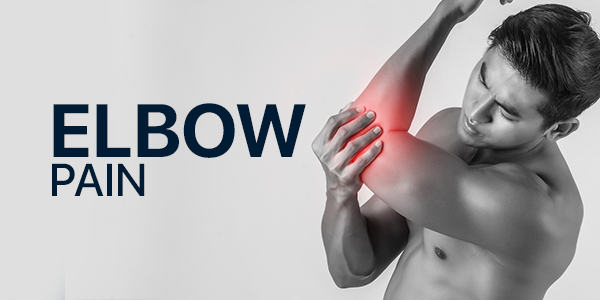
<style>
.page{position:relative;width:600px;height:300px}
.page>*{position:absolute;margin:0}
.t1{font:75px "SFProDisplay-Bold";color:#001c34;text-transform:uppercase}
.t2{font:45.8px "SFProDisplay-Medium";color:#001c34;text-transform:uppercase}
</style>
<div class="page">
<p class="t1" style="left:53px;top:103px;width:253px;height:55px">ELBOW</p>
<p class="t2" style="left:52px;top:163px;width:93px;height:33px">Pain</p>
</div>
